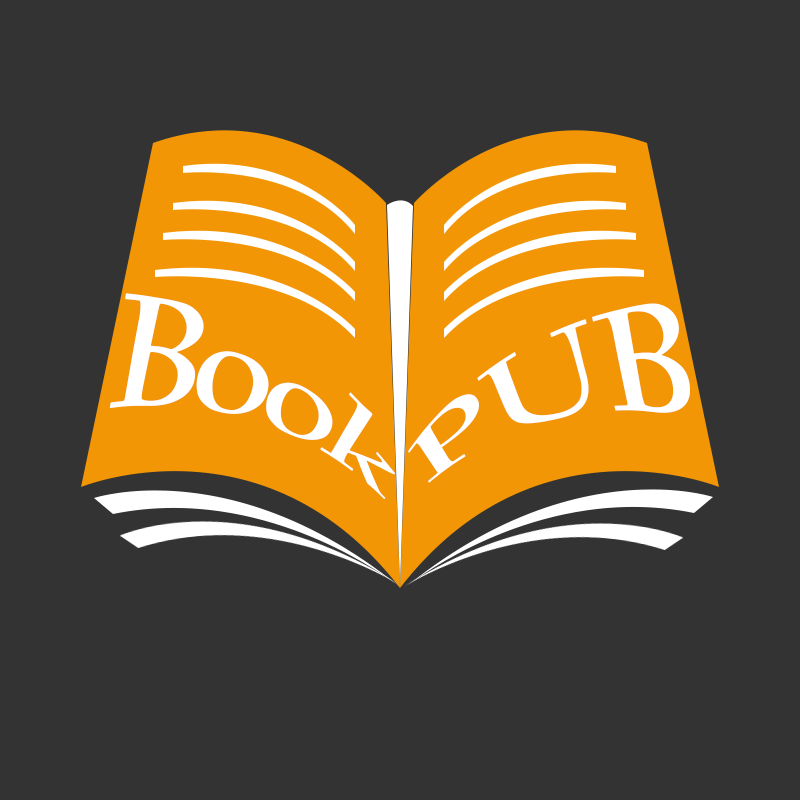
<style>
.page{position:relative;width:800px;height:800px;background:#333333}
.page>*{position:absolute;margin:0}
.t1{font:125px "CalifornianFB-Bold";letter-spacing:-0.05em;color:#ffffff}
.t2{font:125px "CalifornianFB-Bold";color:#ffffff}
</style>
<div class="page">
<p class="t1" style="left:109px;top:293px;width:286px;height:206px;rotate:25deg">Book</p>
<p class="t2" style="left:408px;top:303px;width:283px;height:180px;rotate:-21deg">PUB</p>
</div>
